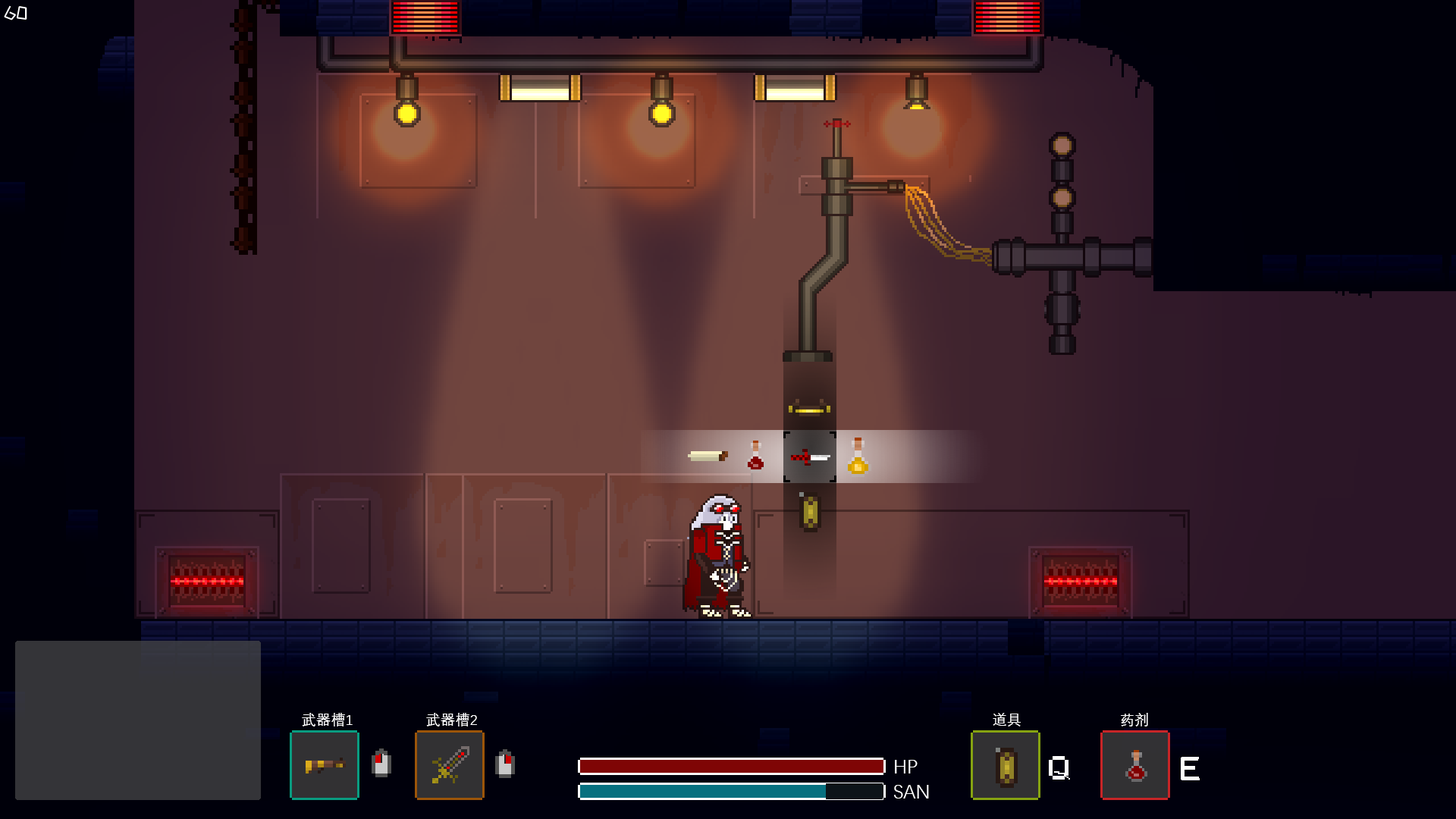
<style>
.page{position:relative;width:1456px;height:819px}
.page>*{position:absolute;margin:0}
.t1{font:14.7px "DengXian";color:#ffffff}
.t2{font:19.9px "DengXian";color:#ffffff}
.t3{font:19.5px "DengXian";color:#ffffff}
</style>
<div class="page">
<p class="t1" style="left:302px;top:713px;width:51px;height:13px">武器槽1</p>
<p class="t1" style="left:426px;top:713px;width:51px;height:13px">武器槽2</p>
<p class="t1" style="left:993px;top:713px;width:28px;height:13px">道具</p>
<p class="t1" style="left:1121px;top:713px;width:27px;height:13px">药剂</p>
<p class="t2" style="left:895px;top:760px;width:23px;height:13px">HP</p>
<p class="t3" style="left:894px;top:785px;width:35px;height:14px">SAN</p>
</div>
